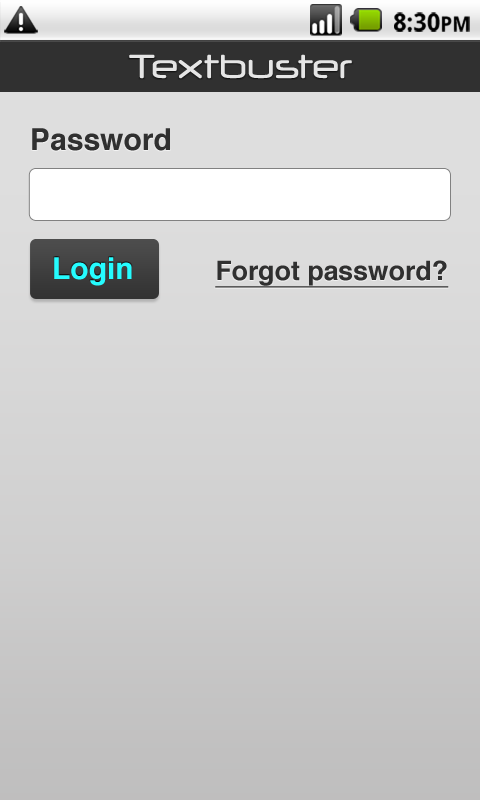
<style>
.page{position:relative;width:480px;height:800px}
.page>*{position:absolute;margin:0}
.t1{font:24px "DroidSans-Bold";letter-spacing:0.005em;color:#000000}
.t2{font:20px "DroidSans-Bold";letter-spacing:0.005em;color:#000000}
.t3{font:30px "Helvetica-Bold";color:#303030}
.t4{font:30px "Helvetica-Bold";color:#25fcff}
.t5{font:26.7px "Helvetica-Bold";color:#303030;text-decoration:underline}
</style>
<div class="page">
<p class="t1" style="left:394px;top:12px;width:76px;height:20px">8:30<span class="t2">PM</span></p>
<p class="t3" style="left:32px;top:128px;width:138px;height:23px">Password</p>
<p class="t4" style="left:54px;top:257px;width:78px;height:29px">Login</p>
<p class="t5" style="left:215px;top:260px;width:234px;height:28px">Forgot password?</p>
</div>
